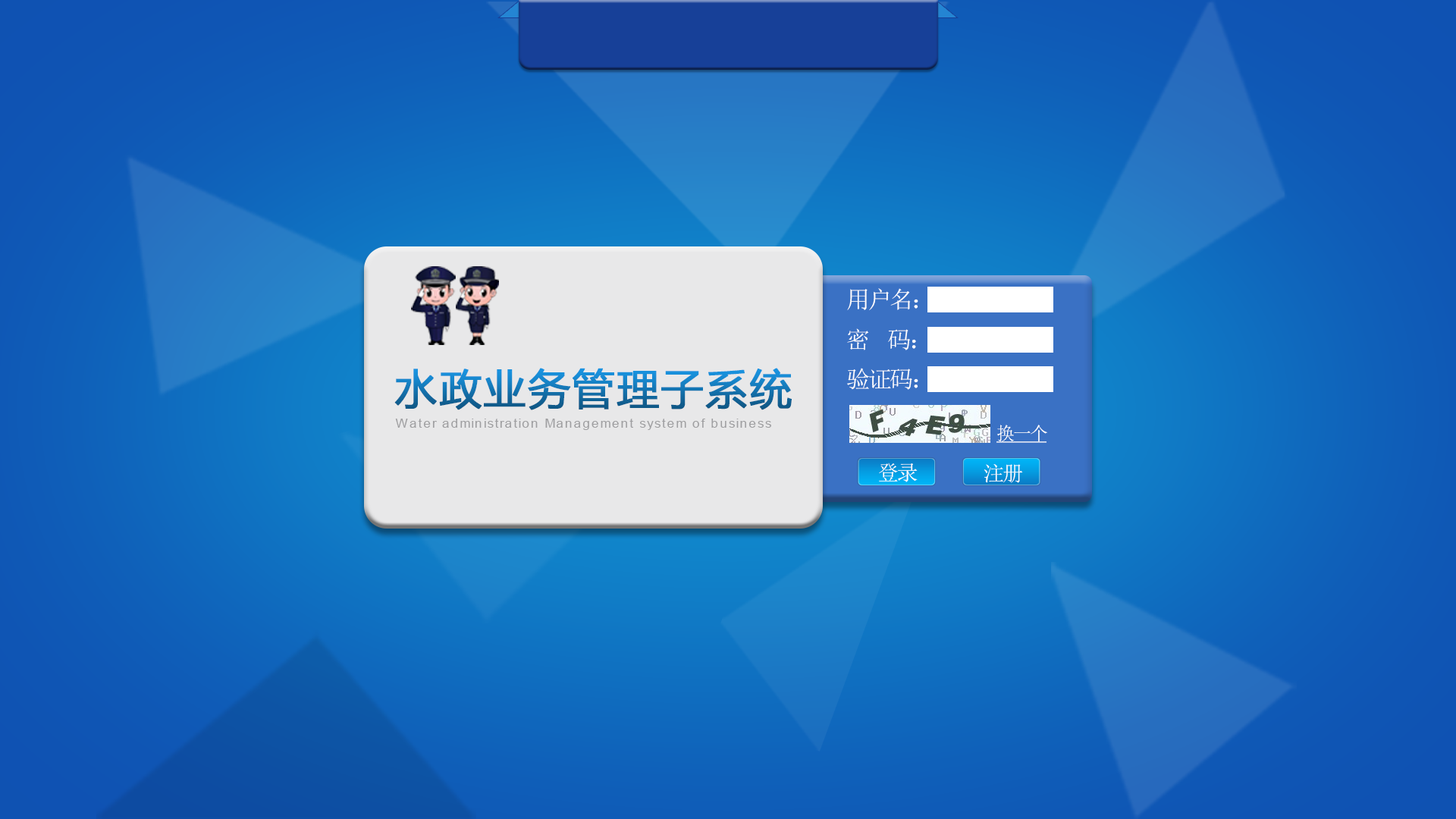
<style>
.page{position:relative;width:1456px;height:819px}
.page>*{position:absolute;margin:0}
.t1{font:23.6px "SimSun";letter-spacing:-0.085em;color:#ffffff}
.t2{font:42px "MicrosoftYaHei";letter-spacing:0.025em;font-weight:bold}
.t3{font:13.1px "ArialMT";letter-spacing:0.075em;color:#9f9fa1}
.t4{font:18.2px "AdobeHeitiStd-Regular";letter-spacing:-0.085em;color:#ffffff;text-decoration:underline}
.t5{font:21px "AdobeHeitiStd-Regular";letter-spacing:-0.085em;color:#ffffff}
</style>
<div class="page">
<p class="t1" style="left:847px;top:288px;width:71px;height:22px">用户名：</p>
<p class="t1" style="left:847px;top:328px;width:69px;height:22px">密  码：</p>
<p class="t2" style="left:394px;top:368px;width:398px;height:42px">水政业务管理子系统</p>
<p class="t1" style="left:847px;top:368px;width:71px;height:22px">验证码：</p>
<p class="t3" style="left:395px;top:419px;width:376px;height:11px">Water administration Management system of business</p>
<p class="t4" style="left:996px;top:425px;width:51px;height:18px">换一个</p>
<p class="t5" style="left:879px;top:463px;width:39px;height:19px">登录</p>
<p class="t5" style="left:984px;top:464px;width:39px;height:19px">注册</p>
</div>
